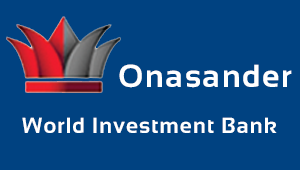
<style>
.page{position:relative;width:300px;height:170px;background:#004281}
.page>*{position:absolute;margin:0}
.t1{font:32px "Sansation-Bold";letter-spacing:0.05em;color:#ffffff}
.t2{font:22px "Sansation-Bold";letter-spacing:0.05em;color:#ffffff}
</style>
<div class="page">
<p class="t1" style="left:119px;top:64px;width:173px;height:24px">Onasander</p>
<p class="t2" style="left:22px;top:117px;width:255px;height:16px">World Investment Bank</p>
</div>
